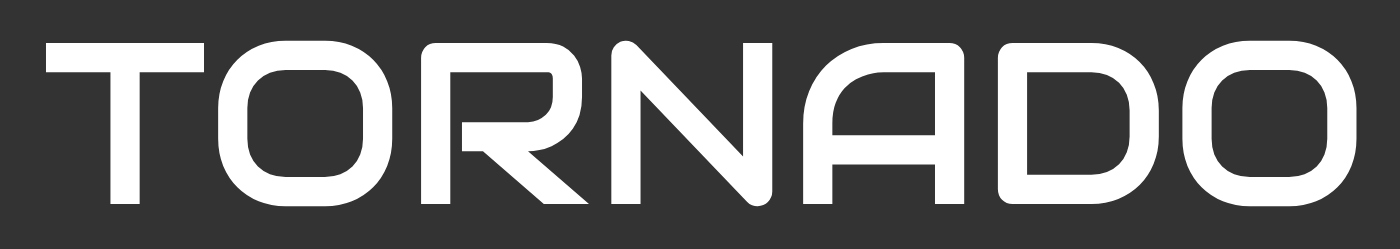
<style>
.page{position:relative;width:1400px;height:249px;background:#333333}
.page>*{position:absolute;margin:0}
.t1{font:230px "Audiowide-Regular";color:#ffffff}
</style>
<div class="page">
<p class="t1" style="left:45px;top:40px;width:1312px;height:167px">TORNADO</p>
</div>
